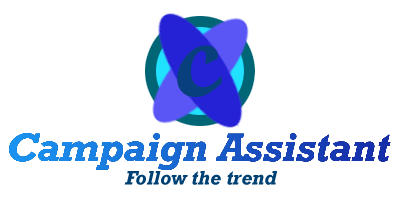
<style>
.page{position:relative;width:400px;height:200px;background:#ffffff}
.page>*{position:absolute;margin:0}
.t1{font:120px "ScriptMTBold";color:#083f7d}
.t2{font:20px "Rockwell-BoldItalic";color:#004173}
</style>
<div class="page">
<p class="t1" style="left:177px;top:45px;width:45px;height:52px">c</p>
<p class="t2" style="left:124px;top:171px;width:154px;height:14px">Follow the trend</p>
</div>
